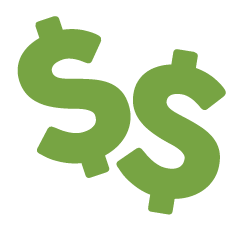
<style>
.page{position:relative;width:238px;height:242px;background:#ffffff}
.page>*{position:absolute;margin:0}
.t1{font:175px "COCOGOOSE";color:#77a443}
</style>
<div class="page">
<p class="t1" style="left:17px;top:16px;width:114px;height:162px;rotate:-19deg">$</p>
<p class="t1" style="left:116px;top:49px;width:110px;height:166px;rotate:9deg">$</p>
</div>
